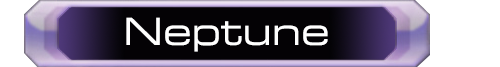
<style>
.page{position:relative;width:500px;height:67px;background:#040205}
.page>*{position:absolute;margin:0}
.t1{font:37.3px "Square721BT-RomanExtended";color:#ffffff}
</style>
<div class="page">
<p class="t1" style="left:126px;top:17px;width:202px;height:35px">Neptune</p>
</div>
